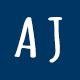
<style>
.page{position:relative;width:80px;height:80px;background:#003663}
.page>*{position:absolute;margin:0}
.t1{font:53.2px "AmaticSC-Bold";letter-spacing:0.1em;color:#ffffff;scale:1.43 1}
</style>
<div class="page">
<p class="t1" style="left:14px;top:17px;width:48px;height:46px">AJ</p>
</div>
